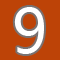
<style>
.page{position:relative;width:60px;height:60px;background:#bd4307}
.page>*{position:absolute;margin:0}
.t1{font:60px "MicrosoftYaHei";color:#ffffff}
</style>
<div class="page">
<p class="t1" style="left:14px;top:7px;width:30px;height:47px">9</p>
</div>
